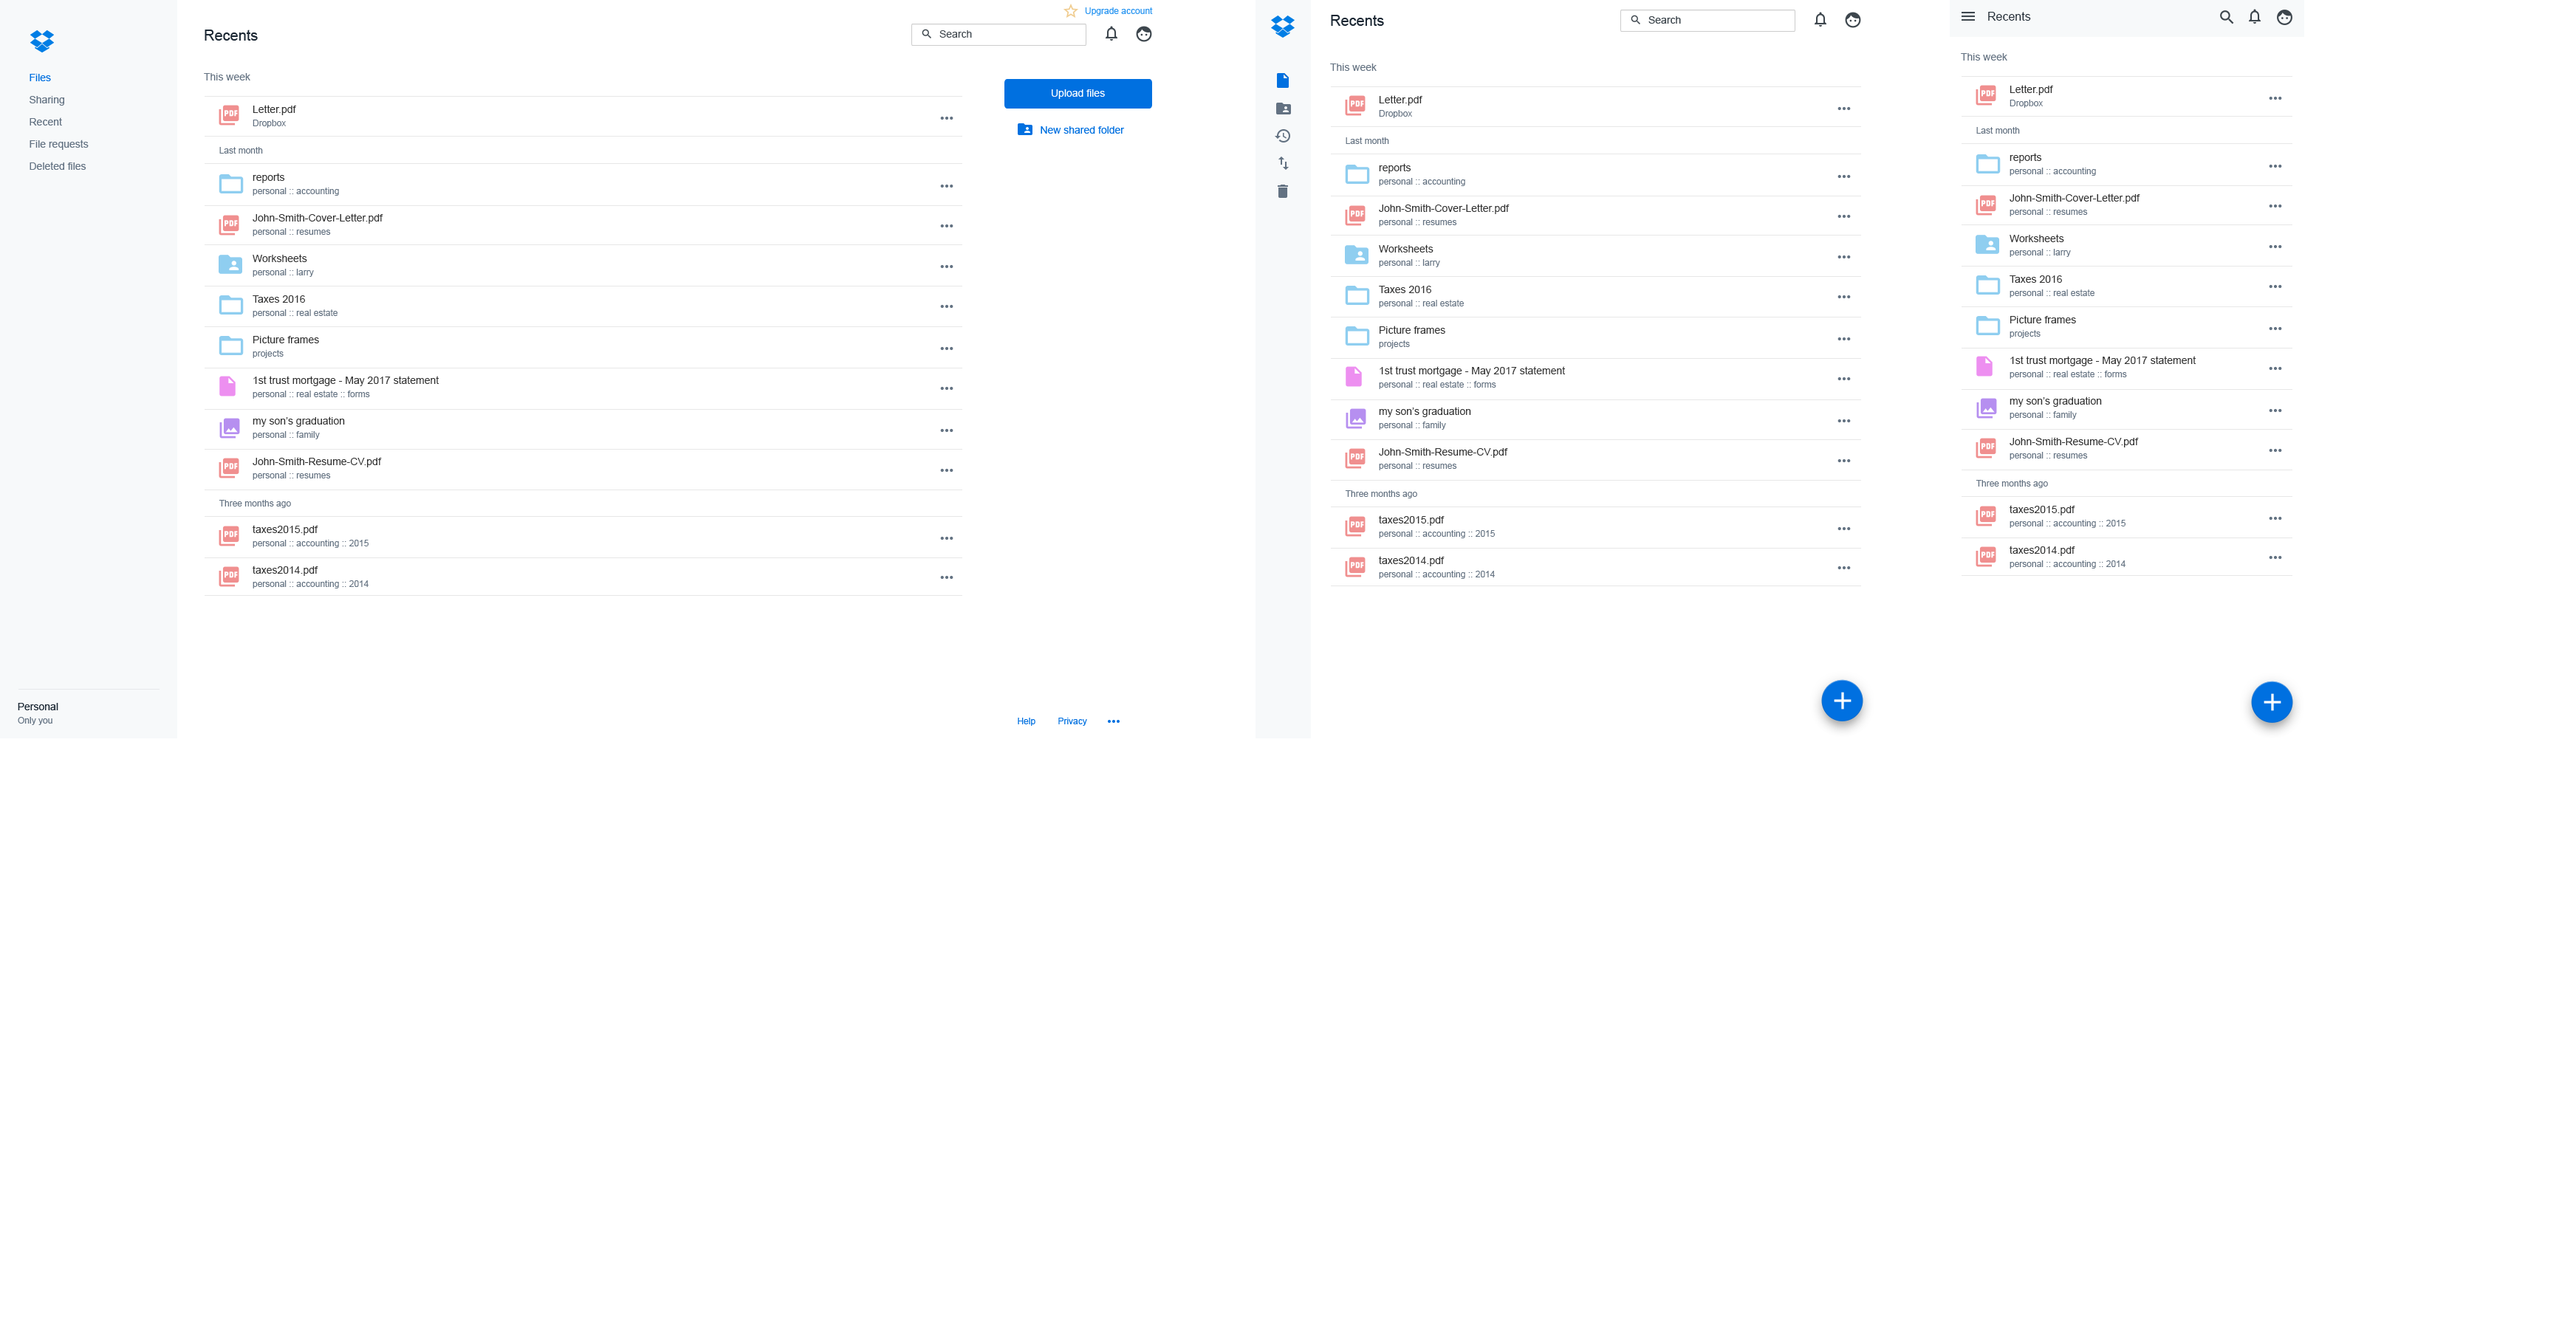
<style>
.page{position:relative;width:2576px;height:1329px;background:#ffffff}
.page>*{position:absolute;margin:0}
.t1{font:11.8px "ArialMT";color:#1b2733}
.t2{font:10.3px "ArialMT";color:#637282}
.t3{font:10.3px/40.6px "ArialMT";color:#333333}
.t4{font:8.9px/40.6px "ArialMT";color:#637282}
.t5{font:8.9px "ArialMT";color:#637282}
</style>
<div class="page">
<p class="t1" style="left:1988px;top:12px;width:43px;height:9px">Recents</p>
<p class="t2" style="left:1961px;top:53px;width:46px;height:8px">This week</p>
<p class="t2" style="left:1330px;top:64px;width:47px;height:7px">This week</p>
<p class="t2" style="left:204px;top:73px;width:46px;height:7px">This week</p>
<p class="t3" style="left:2010px;top:85px;width:186px;height:471px">Letter.pdf<br><br>reports<br>John-Smith-Cover-Letter.pdf<br>Worksheets<br>Taxes 2016<br>Picture frames<br>1st trust mortgage - May 2017 statement <br>my son’s graduation<br>John-Smith-Resume-CV.pdf<br><br>taxes2015.pdf<br>taxes2014.pdf</p>
<p class="t3" style="left:1379px;top:95px;width:187px;height:471px">Letter.pdf<br><br>reports<br>John-Smith-Cover-Letter.pdf<br>Worksheets<br>Taxes 2016<br>Picture frames<br>1st trust mortgage - May 2017 statement <br>my son’s graduation<br>John-Smith-Resume-CV.pdf<br><br>taxes2015.pdf<br>taxes2014.pdf</p>
<p class="t4" style="left:2010px;top:100px;width:117px;height:469px">Dropbox<br><br>personal :: accounting<br>personal :: resumes<br>personal :: larry<br>personal :: real estate<br>projects<br>personal :: real estate :: forms<br>personal :: family<br>personal :: resumes<br><br>personal :: accounting :: 2015<br>personal :: accounting :: 2014</p>
<p class="t3" style="left:253px;top:105px;width:186px;height:471px">Letter.pdf<br><br>reports<br>John-Smith-Cover-Letter.pdf<br>Worksheets<br>Taxes 2016<br>Picture frames<br>1st trust mortgage - May 2017 statement <br>my son’s graduation<br>John-Smith-Resume-CV.pdf<br><br>taxes2015.pdf<br>taxes2014.pdf</p>
<p class="t4" style="left:1379px;top:110px;width:117px;height:469px">Dropbox<br><br>personal :: accounting<br>personal :: resumes<br>personal :: larry<br>personal :: real estate<br>projects<br>personal :: real estate :: forms<br>personal :: family<br>personal :: resumes<br><br>personal :: accounting :: 2015<br>personal :: accounting :: 2014</p>
<p class="t4" style="left:253px;top:120px;width:117px;height:469px">Dropbox<br><br>personal :: accounting<br>personal :: resumes<br>personal :: larry<br>personal :: real estate<br>projects<br>personal :: real estate :: forms<br>personal :: family<br>personal :: resumes<br><br>personal :: accounting :: 2015<br>personal :: accounting :: 2014</p>
<p class="t5" style="left:1346px;top:137px;width:43px;height:7px">Last month</p>
<p class="t5" style="left:1976px;top:127px;width:44px;height:7px">Last month</p>
<p class="t5" style="left:219px;top:147px;width:44px;height:7px">Last month</p>
<p class="t5" style="left:1976px;top:480px;width:72px;height:8px">Three months ago</p>
<p class="t5" style="left:1345px;top:490px;width:72px;height:9px">Three months ago</p>
<p class="t5" style="left:219px;top:500px;width:72px;height:8px">Three months ago</p>
</div>
